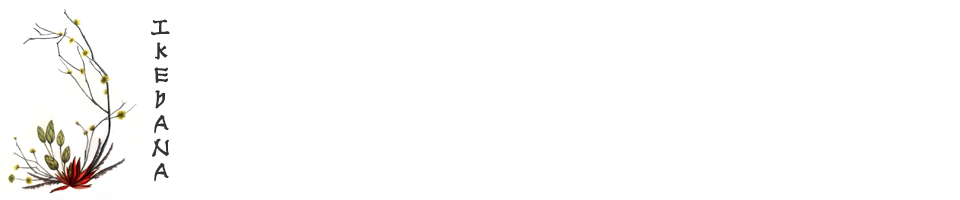
<style>
.page{position:relative;width:960px;height:200px;background:#ffffff}
.page>*{position:absolute;margin:0}
.t1{font:20px "NipponLatin-Bold";color:#333333;font-weight:bold}
</style>
<div class="page">
<p class="t1" style="left:151px;top:19px;width:19px;height:163px;text-align:center">I<br>K<br>E<br>B<br>A<br>N<br>A</p>
</div>
